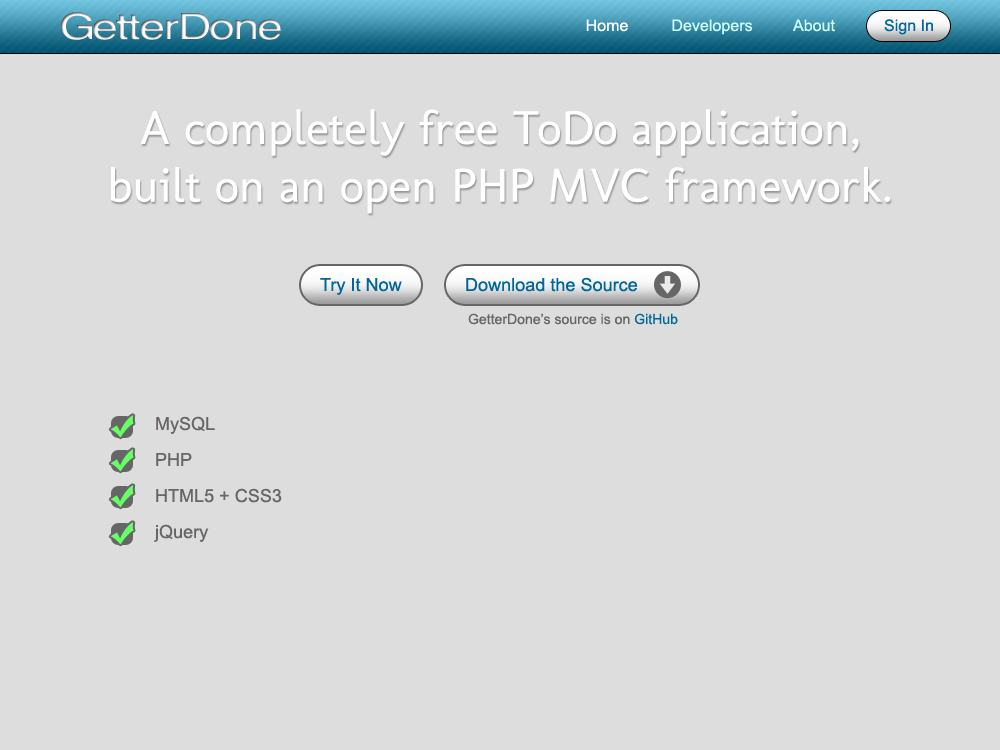
<style>
.page{position:relative;width:1000px;height:750px;background:#dddddd}
.page>*{position:absolute;margin:0}
.t1{font:36px "Sveningsson";letter-spacing:0.002em}
.t2{font:16px "ArialMT";letter-spacing:0.002em;color:#ffffff}
.t3{font:16px "ArialMT";letter-spacing:0.002em;color:#cfffff}
.t4{font:16px "ArialMT";letter-spacing:0.002em;color:#006699}
.t5{font:48px "Molengo";letter-spacing:0.002em;color:#ffffff}
.t6{font:18px "ArialMT";letter-spacing:0.002em;color:#006699}
.t7{font:14px "ArialMT";letter-spacing:0.002em;color:#666666}
.t8{font:14px "ArialMT";letter-spacing:0.002em;color:#006699}
.t9{font:18px/36px "ArialMT";letter-spacing:0.002em;color:#666666}
</style>
<div class="page">
<p class="t1" style="left:61px;top:12px;width:220px;height:28px">GetterDone</p>
<p class="t2" style="left:586px;top:19px;width:42px;height:13px">Home</p>
<p class="t3" style="left:672px;top:19px;width:80px;height:16px">Developers</p>
<p class="t3" style="left:793px;top:19px;width:42px;height:13px">About</p>
<p class="t4" style="left:884px;top:19px;width:49px;height:16px">Sign In</p>
<p class="t5" style="left:111px;top:109px;width:780px;height:105px;text-align:center">A completely free ToDo application,<br>built on an open PHP MVC framework.</p>
<p class="t6" style="left:320px;top:278px;width:82px;height:17px">Try It Now</p>
<p class="t6" style="left:466px;top:277px;width:172px;height:15px">Download the Source</p>
<p class="t7" style="left:468px;top:313px;width:210px;height:12px">GetterDone’s source is on <span class="t8">GitHub</span></p>
<p class="t9" style="left:154px;top:416px;width:128px;height:126px">MySQL<br>PHP<br>HTML5 + CSS3<br>jQuery</p>
</div>
